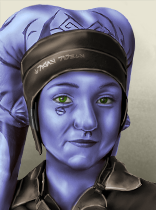
<style>
.page{position:relative;width:156px;height:210px}
.page>*{position:absolute;margin:0}
.t1{font:8.7px "Aurek-BeshHand";letter-spacing:-0.065em;text-transform:uppercase}
</style>
<div class="page">
<p class="t1" style="left:34px;top:54px;width:51px;height:20px;rotate:-18deg">TRANS RIGHTS</p>
</div>
